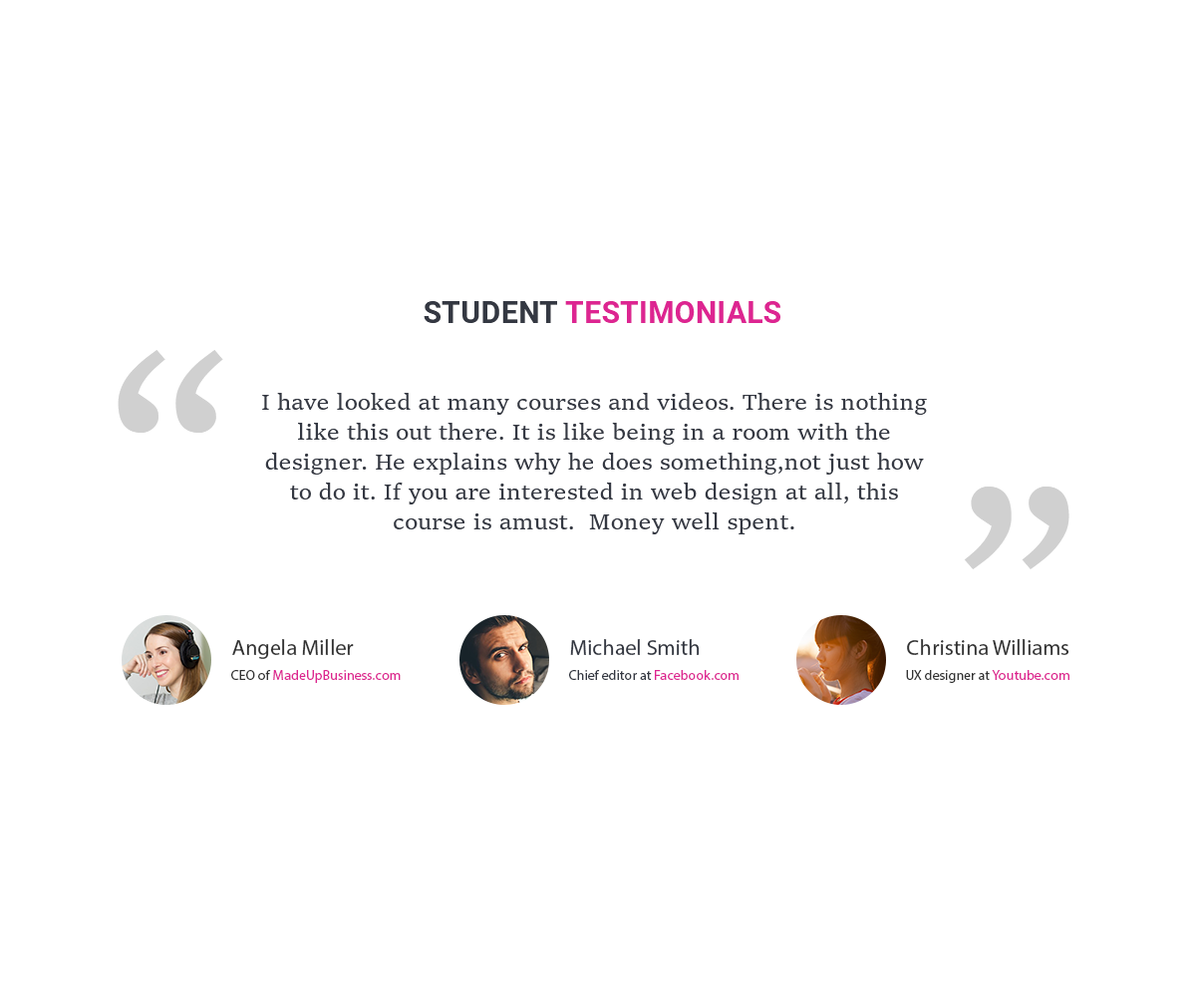
<style>
.page{position:relative;width:1196px;height:997px;background:#ffffff}
.page>*{position:absolute;margin:0}
.t1{font:29.9px "Roboto-Bold";letter-spacing:0.01em;color:#dd2591;text-transform:uppercase}
.t2{font:29.9px "Roboto-Bold";letter-spacing:0.01em;color:#343842;text-transform:uppercase}
.t3{font:299.1px "SitkaText";color:#d0d0d0}
.t4{font:23.9px/29.9px "SitkaText";color:#343842}
.t5{font:21.9px "MyriadPro-Regular";color:#333333}
.t6{font:21.9px "MyriadPro-Regular";color:#343842}
.t7{font:14px "MyriadPro-Regular";color:#dd2591}
.t8{font:14px "MyriadPro-Regular";color:#333333}
.t9{font:14px "MyriadPro-Regular";color:#343842}
</style>
<div class="page">
<p class="t1" style="left:424px;top:301px;width:357px;height:22px"><span class="t2">Student </span>Testimonials</p>
<p class="t3" style="left:118px;top:350px;width:105px;height:83px">“</p>
<p class="t4" style="left:262px;top:393px;width:665px;height:141px;text-align:center">I have looked at many courses and videos. There is nothing like this out there. It is like being in a room with the designer. He explains why he does something,not just how to do it. If you are interested in web design at all, this course is amust.  Money well spent.</p>
<p class="t3" style="left:964px;top:486px;width:106px;height:83px">”</p>
<p class="t5" style="left:232px;top:639px;width:122px;height:20px">Angela Miller</p>
<p class="t6" style="left:570px;top:639px;width:130px;height:16px">Michael Smith</p>
<p class="t5" style="left:907px;top:639px;width:163px;height:16px">Christina Williams</p>
<p class="t7" style="left:231px;top:670px;width:170px;height:13px"><span class="t8">CEO of </span>MadeUpBusiness.com</p>
<p class="t9" style="left:569px;top:670px;width:170px;height:10px">Chief editor at <span class="t7">Facebook.com</span></p>
<p class="t8" style="left:906px;top:670px;width:164px;height:13px">UX designer at <span class="t7">Youtube.com</span></p>
</div>
